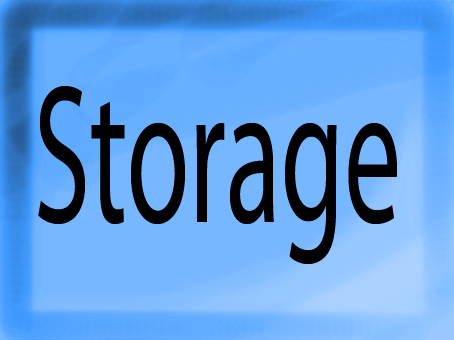
<style>
.page{position:relative;width:454px;height:340px}
.page>*{position:absolute;margin:0}
.t1{font:199.5px "MyriadPro-Regular";color:#000000;scale:0.57 1}
</style>
<div class="page">
<p class="t1" style="left:38px;top:86px;width:359px;height:178px">Storage</p>
</div>
